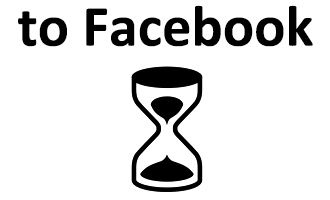
<style>
.page{position:relative;width:330px;height:200px;background:#ffffff}
.page>*{position:absolute;margin:0}
.t1{font:100px "Calibri-Bold";color:#000000}
</style>
<div class="page">
<p class="t1" style="left:18px;top:5px;width:295px;height:42px">to Facebook</p>
</div>
